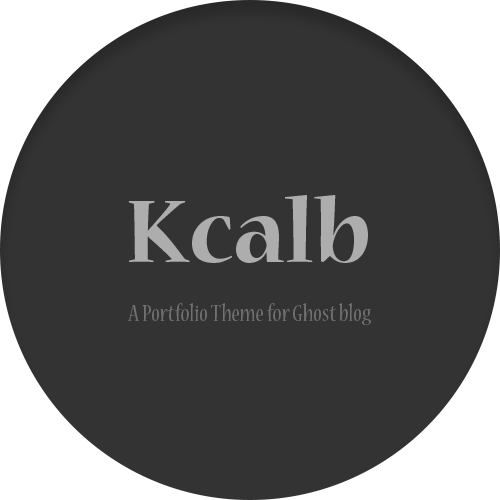
<style>
.page{position:relative;width:500px;height:500px;background:#333333}
.page>*{position:absolute;margin:0}
.t1{font:98.8px "NuevaStd-Bold";color:#adadad}
.t2{font:25.2px "NuevaStd-Cond";color:#717171}
</style>
<div class="page">
<p class="t1" style="left:128px;top:195px;width:240px;height:68px">Kcalb</p>
<p class="t2" style="left:128px;top:303px;width:243px;height:22px">A Portfolio Theme for Ghost blog</p>
</div>
